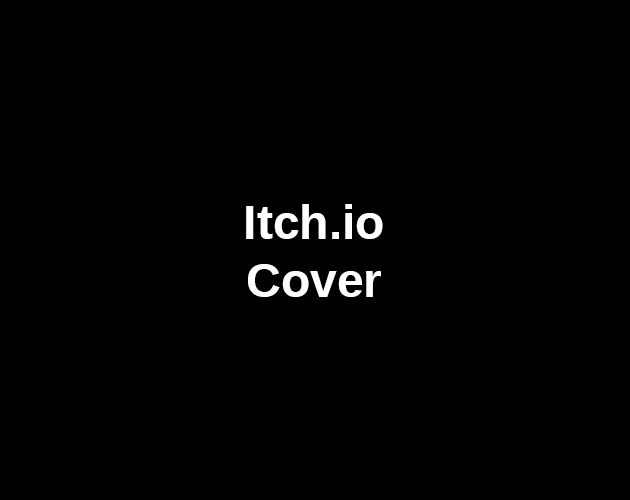
<style>
.page{position:relative;width:630px;height:500px;background:#000000}
.page>*{position:absolute;margin:0}
.t1{font:48px "LiberationSans-Bold";color:#ffffff}
</style>
<div class="page">
<p class="t1" style="left:246px;top:204px;width:137px;height:93px;text-align:center">Itch.io<br>Cover</p>
</div>
